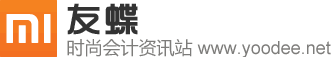
<style>
.page{position:relative;width:335px;height:57px;background:#ffffff}
.page>*{position:absolute;margin:0}
.t1{font:36px "TRENDS";letter-spacing:0.1em;color:#333333;font-weight:bold;scale:0.95 1}
.t2{font:18px "ArialMT";color:#7d7c7a}
.t3{font:18px "MicrosoftYaHei";color:#7d7c7a}
</style>
<div class="page">
<p class="t1" style="left:67px;top:3px;width:71px;height:32px">友蝶</p>
<p class="t2" style="left:67px;top:39px;width:264px;height:19px"><span class="t3">时尚会计资讯站 </span>www.yoodee.net</p>
</div>
